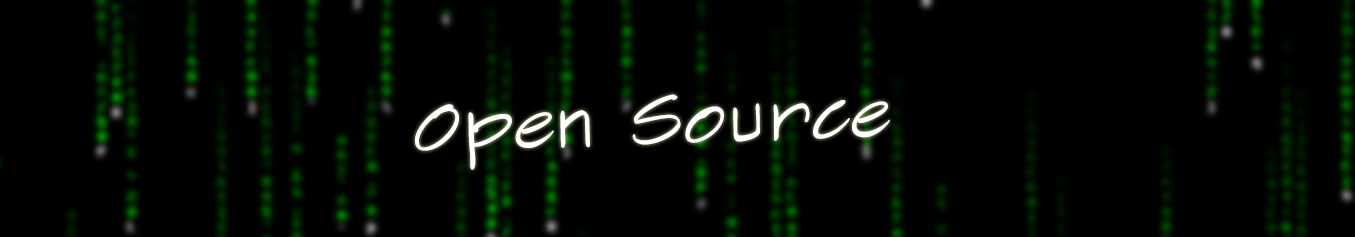
<style>
.page{position:relative;width:1355px;height:237px;background:#000000}
.page>*{position:absolute;margin:0}
.t1{font:72.9px "SketchFlowPrint";color:#ffffff}
</style>
<div class="page">
<p class="t1" style="left:415px;top:94px;width:475px;height:76px;rotate:-2deg">Open Source</p>
</div>
